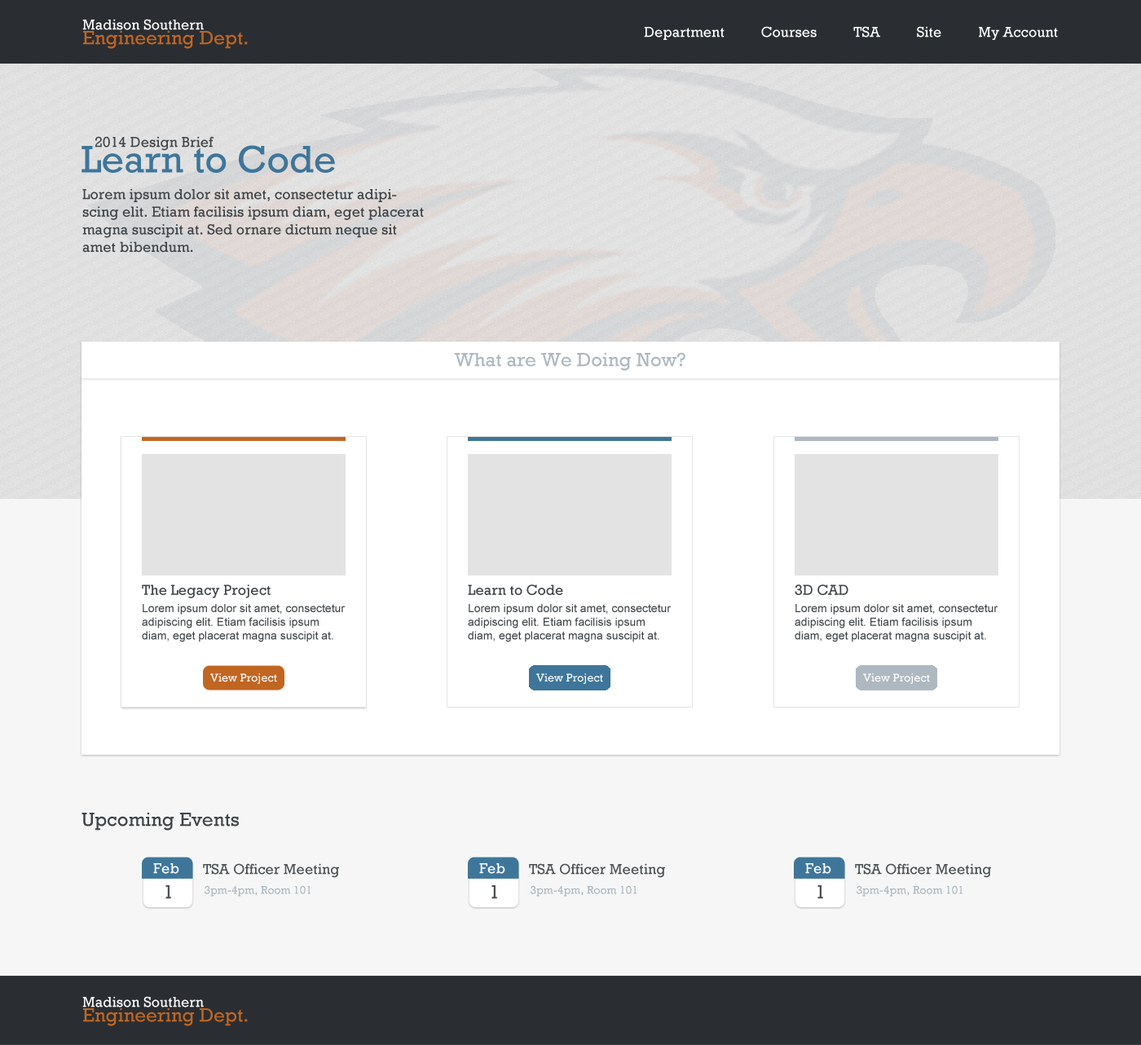
<style>
.page{position:relative;width:1141px;height:1045px;background:#ffffff}
.page>*{position:absolute;margin:0}
.t1{font:14.7px "Rockwell";color:#ffffff}
.t2{font:19.6px "Rockwell";color:#c16622}
.t3{font:14.7px "Rockwell";color:#3f4448}
.t4{font:39.1px "Rockwell";color:#3e769a}
.t5{font:19.6px "Rockwell";color:#aeb8c0}
.t6{font:11.4px "ArialMT";color:#3f4448}
.t7{font:11.4px "Rockwell";color:#ffffff}
.t8{font:19.6px "Rockwell";color:#3f4448}
.t9{font:14.7px "Rockwell";color:#4b5053}
.t10{font:19.6px "Rockwell";color:#4b5053}
.t11{font:11.4px "Rockwell";color:#aeb8c0}
</style>
<div class="page">
<p class="t1" style="left:82px;top:19px;width:122px;height:11px">Madison Southern</p>
<p class="t1" style="left:644px;top:26px;width:414px;height:14px">Department          Courses          TSA          Site          My Account</p>
<p class="t2" style="left:83px;top:30px;width:165px;height:19px">Engineering Dept.</p>
<p class="t3" style="left:95px;top:136px;width:119px;height:15px">2014 Design Brief</p>
<p class="t4" style="left:82px;top:145px;width:253px;height:28px">Learn to Code</p>
<p class="t3" style="left:82px;top:188px;width:342px;height:65px">Lorem ipsum dolor sit amet, consectetur adipiscing elit. Etiam facilisis ipsum diam, eget placerat magna suscipit at. Sed ornare dictum neque sit amet bibendum.</p>
<p class="t5" style="left:454px;top:352px;width:231px;height:19px">What are We Doing Now?</p>
<p class="t3" style="left:142px;top:584px;width:129px;height:14px">The Legacy Project</p>
<p class="t3" style="left:468px;top:584px;width:95px;height:11px">Learn to Code</p>
<p class="t3" style="left:795px;top:584px;width:54px;height:11px">3D CAD</p>
<p class="t6" style="left:142px;top:604px;width:204px;height:38px">Lorem ipsum dolor sit amet, consectetur adipiscing elit. Etiam facilisis ipsum diam, eget placerat magna suscipit at.</p>
<p class="t6" style="left:468px;top:604px;width:204px;height:38px">Lorem ipsum dolor sit amet, consectetur adipiscing elit. Etiam facilisis ipsum diam, eget placerat magna suscipit at.</p>
<p class="t6" style="left:795px;top:604px;width:203px;height:38px">Lorem ipsum dolor sit amet, consectetur adipiscing elit. Etiam facilisis ipsum diam, eget placerat magna suscipit at.</p>
<p class="t7" style="left:210px;top:673px;width:67px;height:11px">View Project</p>
<p class="t7" style="left:536px;top:673px;width:67px;height:11px">View Project</p>
<p class="t7" style="left:863px;top:673px;width:67px;height:11px">View Project</p>
<p class="t8" style="left:82px;top:812px;width:157px;height:19px">Upcoming Events</p>
<p class="t1" style="left:153px;top:863px;width:26px;height:11px">Feb</p>
<p class="t9" style="left:203px;top:863px;width:136px;height:15px">TSA Officer Meeting</p>
<p class="t1" style="left:479px;top:863px;width:26px;height:11px">Feb</p>
<p class="t9" style="left:529px;top:863px;width:136px;height:15px">TSA Officer Meeting</p>
<p class="t1" style="left:805px;top:863px;width:26px;height:11px">Feb</p>
<p class="t9" style="left:855px;top:863px;width:136px;height:15px">TSA Officer Meeting</p>
<p class="t10" style="left:165px;top:885px;width:6px;height:14px">1</p>
<p class="t11" style="left:205px;top:885px;width:106px;height:12px">3pm-4pm, Room 101</p>
<p class="t10" style="left:492px;top:885px;width:5px;height:14px">1</p>
<p class="t11" style="left:531px;top:885px;width:106px;height:12px">3pm-4pm, Room 101</p>
<p class="t10" style="left:818px;top:885px;width:5px;height:14px">1</p>
<p class="t11" style="left:857px;top:885px;width:106px;height:12px">3pm-4pm, Room 101</p>
<p class="t1" style="left:82px;top:996px;width:122px;height:11px">Madison Southern</p>
<p class="t2" style="left:83px;top:1007px;width:165px;height:19px">Engineering Dept.</p>
</div>
